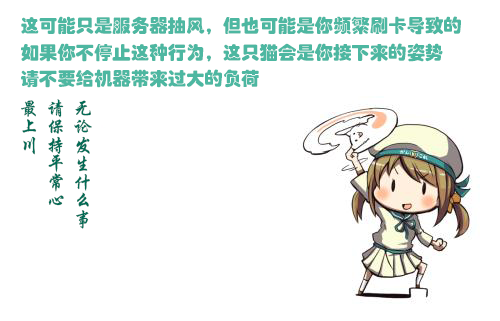
<style>
.page{position:relative;width:500px;height:321px;background:#ffffff}
.page>*{position:absolute;margin:0}
.t1{font:18.4px "FZHPJW--GB1-0";color:#4db7a1}
.t2{font:18.4px "FZXKK--GBK1-0";color:#006b55}
</style>
<div class="page">
<p class="t1" style="left:21px;top:16px;width:440px;height:72px">这可能只是服务器抽风，但也可能是你频繁刷卡导致的<br>如果你不停止这种行为，这只猫会是你接下来的姿势<br>请不要给机器带来过大的负荷</p>
<p class="t2" style="left:21px;top:99px;width:71px;height:130px">无论发生什么事<br>请保持平常心<br>最上川</p>
</div>
